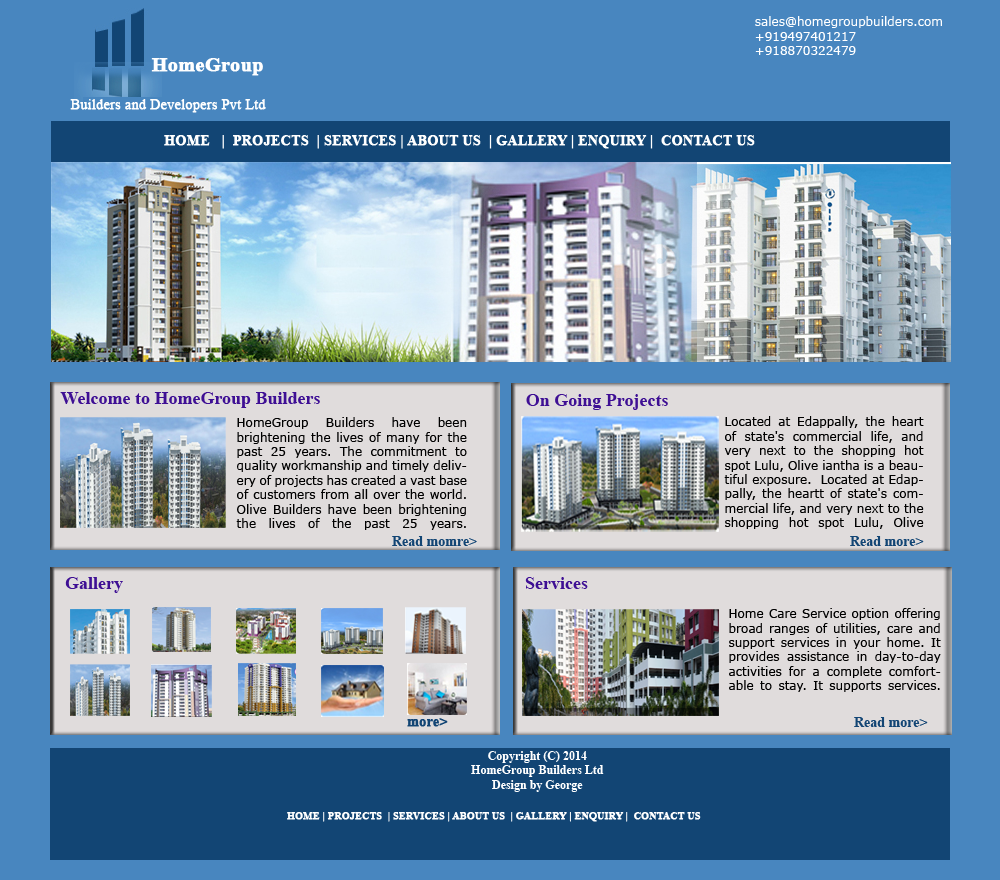
<style>
.page{position:relative;width:1000px;height:880px;background:#4886bf}
.page>*{position:absolute;margin:0}
.t1{font:12px "Verdana";color:#ffffff}
.t2{font:20px "TimesNewRomanPS-BoldMT";color:#ffffff;font-weight:bold}
.t3{font:14px "TimesNewRomanPSMT";color:#ffffff;font-weight:bold}
.t4{font:14px "TimesNewRomanPS-BoldMT";color:#ffffff;font-weight:bold}
.t5{font:18px "TimesNewRomanPS-BoldMT";color:#3e0f94}
.t6{font:12px "Verdana";color:#000000}
.t7{font:14px "TimesNewRomanPS-BoldMT";color:#124574}
.t8{font:14px "TimesNewRomanPS-BoldMT";color:#124574;font-weight:bold}
.t9{font:12px "TimesNewRomanPS-BoldMT";color:#ffffff}
.t10{font:10px "TimesNewRomanPS-BoldMT";color:#ffffff;font-weight:bold}
</style>
<div class="page">
<p class="t1" style="left:755px;top:16px;width:187px;height:39px">sales@homegroupbuilders.com<br>+919497401217   <br>+918870322479</p>
<p class="t2" style="left:151px;top:58px;width:112px;height:18px">HomeGroup</p>
<p class="t3" style="left:70px;top:99px;width:196px;height:14px">Builders and Developers Pvt Ltd</p>
<p class="t4" style="left:164px;top:135px;width:591px;height:14px">HOME   |  PROJECTS  | SERVICES | ABOUT US  | GALLERY | ENQUIRY |  CONTACT US</p>
<p class="t5" style="left:60px;top:392px;width:260px;height:16px">Welcome to HomeGroup Builders</p>
<p class="t5" style="left:526px;top:394px;width:142px;height:16px">On Going Projects</p>
<p class="t6" style="left:236px;top:417px;width:231px;height:113px;text-align:justify">HomeGroup Builders have been brightening the lives of many for the past 25 years. The commitment to quality workmanship and timely delivery of projects has created a vast base of customers from all over the world. Olive Builders have been brightening the lives of the past 25 years.</p>
<p class="t6" style="left:724px;top:416px;width:200px;height:113px;text-align:justify">Located at Edappally, the heart of state's commercial life, and very next to the shopping hot spot Lulu, Olive iantha is a beautiful exposure.  Located at Edappally, the heartt of state's commercial life, and very next to the shopping hot spot Lulu, Olive iantha is a beautiful exposure. ..</p>
<p class="t7" style="left:392px;top:536px;width:85px;height:10px">Read momre&gt;</p>
<p class="t7" style="left:850px;top:536px;width:74px;height:10px">Read more&gt;</p>
<p class="t5" style="left:65px;top:577px;width:58px;height:16px">Gallery</p>
<p class="t5" style="left:525px;top:577px;width:63px;height:12px">Services</p>
<p class="t6" style="left:729px;top:608px;width:212px;height:84px;text-align:justify">Home Care Service option offering broad ranges of utilities, care and support services in your home. It provides assistance in day-to-day activities for a complete comfortable to stay. It supports services.</p>
<p class="t8" style="left:407px;top:718px;width:41px;height:9px">more&gt;</p>
<p class="t7" style="left:854px;top:717px;width:74px;height:10px">Read more&gt;</p>
<p class="t9" style="left:471px;top:751px;width:133px;height:41px;text-align:center">Copyright (C) 2014 <br>HomeGroup Builders Ltd<br>Design by George</p>
<p class="t10" style="left:287px;top:812px;width:414px;height:10px">HOME | PROJECTS  | SERVICES | ABOUT US  | GALLERY | ENQUIRY |  CONTACT US</p>
</div>
